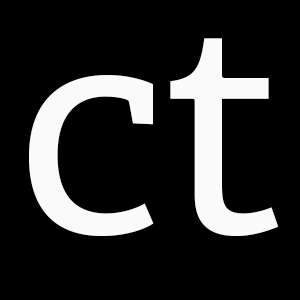
<style>
.page{position:relative;width:300px;height:300px;background:#000000}
.page>*{position:absolute;margin:0}
.t1{font:300px "Adelle-Regular";color:#fafafa}
</style>
<div class="page">
<p class="t1" style="left:29px;top:38px;width:250px;height:198px">ct</p>
</div>
